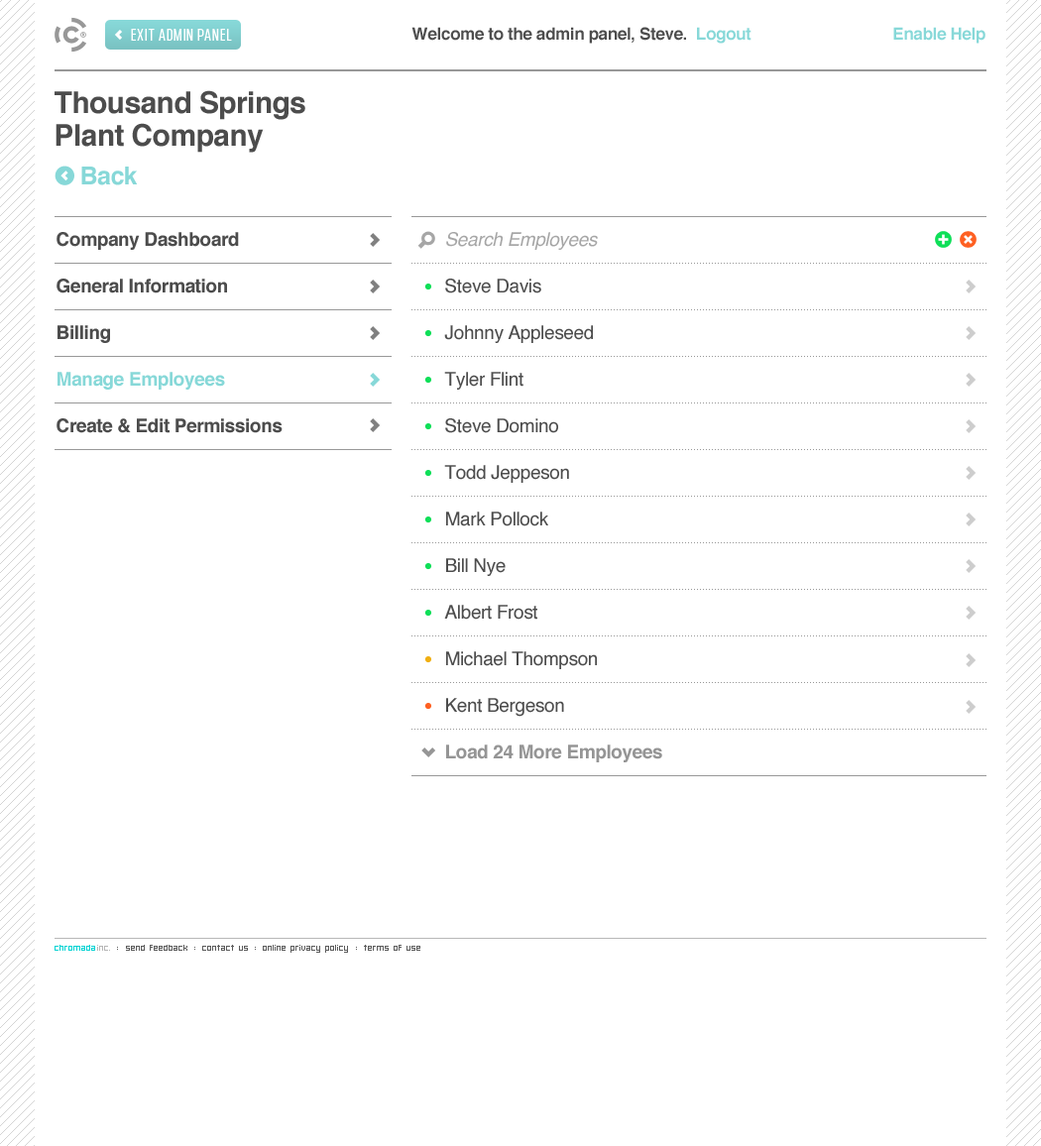
<style>
.page{position:relative;width:1041px;height:1146px;background:#ffffff}
.page>*{position:absolute;margin:0}
.t1{font:16.8px "ChromadicaCondensed";letter-spacing:0.06em;color:#ffffff}
.t2{font:16.8px "Helvetica-Bold";letter-spacing:-0.02em;color:#87d8d8}
.t3{font:16.8px "Helvetica-Bold";letter-spacing:-0.02em;color:#4c4c4c}
.t4{font:29.7px/32.7px "Helvetica-Bold";letter-spacing:-0.02em;color:#4c4c4c}
.t5{font:24.8px/38.7px "Helvetica-Bold";letter-spacing:-0.02em;color:#87d8d8}
.t6{font:18.8px/46.6px "Helvetica-Bold";letter-spacing:-0.02em;color:#4c4c4c}
.t7{font:18.8px/46.6px "Helvetica-Bold";letter-spacing:-0.02em;color:#87d8d8}
.t8{font:18.8px/46.6px "Helvetica";letter-spacing:-0.02em;color:#4c4c4c}
.t9{font:18.8px/46.6px "Helvetica-Oblique";letter-spacing:-0.02em;color:#a6a6a6}
.t10{font:18.8px/46.6px "Helvetica-Bold";letter-spacing:-0.02em;color:#959595}
.t11{font:7.9px "Hooge0655";color:#5b5b5b}
.t12{font:7.9px "Hooge0655";color:#00d3d3}
.t13{font:7.9px "Hooge0655";color:#b6b6b6}
.t14{font:7.9px "Hooge0655";color:#5b5b5b;text-transform:uppercase}
</style>
<div class="page">
<p class="t1" style="left:131px;top:29px;width:101px;height:12px">EXIT ADMIN PANEL</p>
<p class="t2" style="left:411px;top:27px;width:574px;height:17px"><span class="t3">Welcome to the admin panel, Steve.</span>  Logout                                 Enable Help</p>
<p class="t4" style="left:55px;top:90px;width:250px;height:95px">Thousand Springs <br>Plant Company<br><span class="t5">    Back</span></p>
<p class="t6" style="left:56px;top:232px;width:226px;height:201px">Company Dashboard<br>General Information<br>Billing<br><span class="t7">Manage Employees<br></span>Create &amp; Edit Permissions</p>
<p class="t8" style="left:444px;top:232px;width:218px;height:530px"><span class="t9">Search Employees<br></span>Steve Davis<br>Johnny Appleseed<br>Tyler Flint<br>Steve Domino<br>Todd Jeppeson<br>Mark Pollock<br>Bill Nye<br>Albert Frost<br>Michael Thompson<br>Kent Bergeson<br><span class="t10">Load 24 More Employees</span></p>
<p class="t11" style="left:55px;top:945px;width:365px;height:8px"><span class="t12">chromada</span><span class="t13">inc. </span><span class="t14">: </span>send feedback <span class="t14">: </span>contact us <span class="t14">: </span>online privacy policy <span class="t14">: </span>terms of use</p>
</div>
